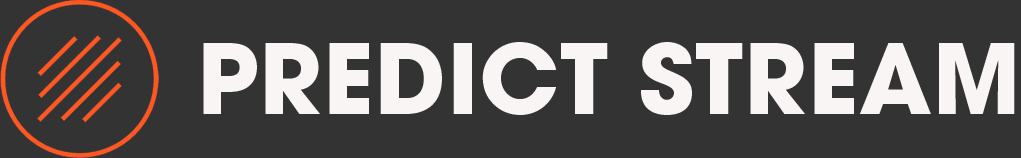
<style>
.page{position:relative;width:1021px;height:158px;background:#333333}
.page>*{position:absolute;margin:0}
.t1{font:96px "ITCAvantGardePro-Bold";letter-spacing:0.01em;color:#faf5f5}
</style>
<div class="page">
<p class="t1" style="left:203px;top:42px;width:812px;height:73px">PREDICT STREAM</p>
</div>
